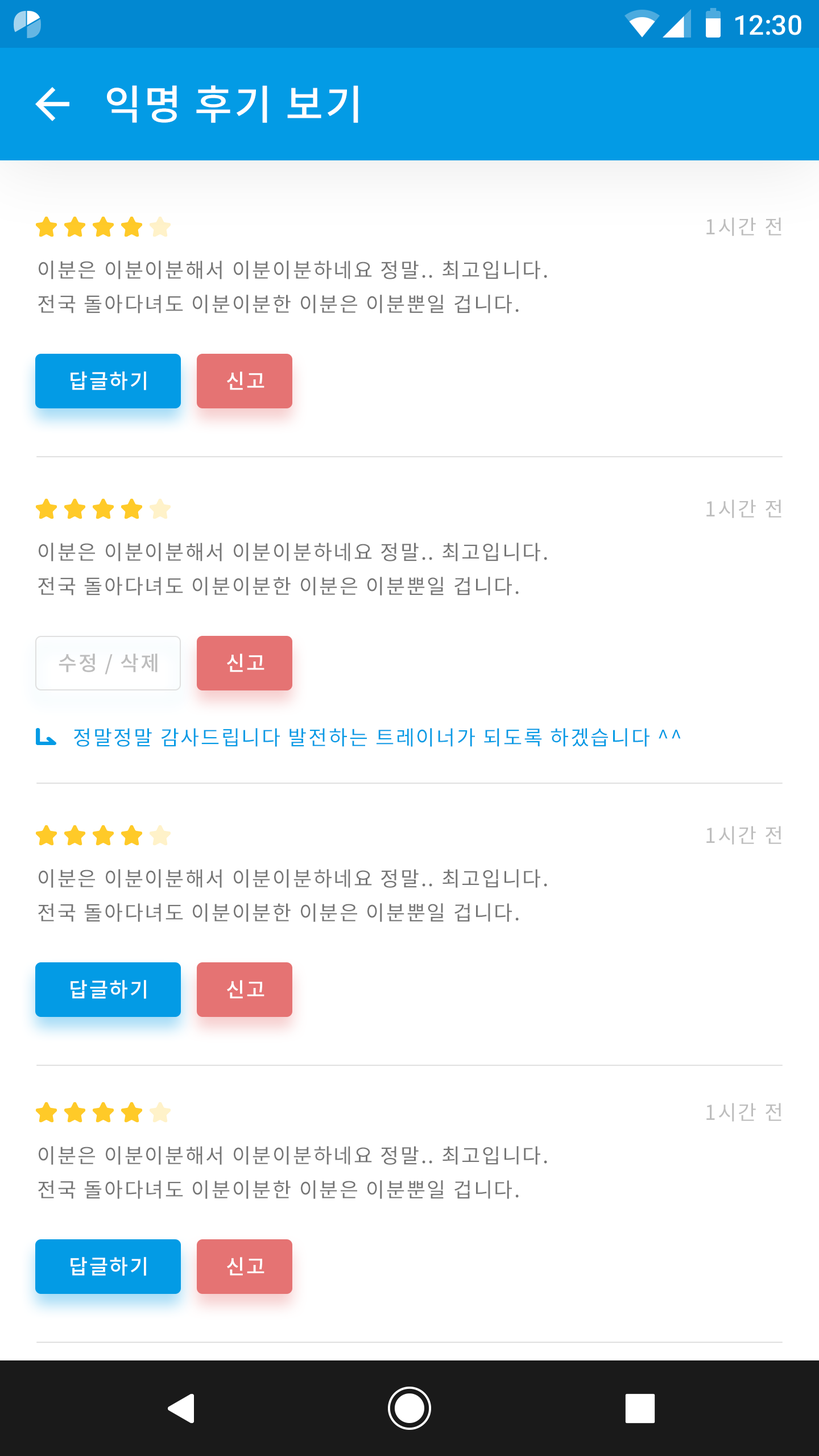
<style>
.page{position:relative;width:819px;height:1456px;background:#ffffff}
.page>*{position:absolute;margin:0}
.t1{font:27.3px "Roboto-Medium";color:#ffffff}
.t2{font:40.9px "NotoSansCJKkr-Medium";letter-spacing:0.05em;color:#ffffff}
.t3{font:20.5px "NotoSansCJKkr-Regular";letter-spacing:0.072em;color:#bdbdbd}
.t4{font:20.5px/34.1px "NotoSansCJKkr-Regular";letter-spacing:0.072em;color:#757575}
.t5{font:20.5px "NotoSansCJKkr-Medium";letter-spacing:0.072em;color:#ffffff}
.t6{font:20.5px "NotoSansCJKkr-Medium";letter-spacing:0.072em;color:#bdbdbd}
.t7{font:20.5px "NotoSansCJKkr-Regular";letter-spacing:0.072em;color:#039be5}
</style>
<div class="page">
<p class="t1" style="left:735px;top:15px;width:66px;height:20px">12:30</p>
<p class="t2" style="left:107px;top:85px;width:251px;height:38px">익명 후기 보기</p>
<p class="t3" style="left:706px;top:217px;width:75px;height:19px">1시간 전</p>
<p class="t4" style="left:38px;top:260px;width:509px;height:53px">이분은 이분이분해서 이분이분하네요 정말.. 최고입니다.<br>전국 돌아다녀도 이분이분한 이분은 이분뿐일 겁니다.</p>
<p class="t5" style="left:71px;top:371px;width:75px;height:19px">답글하기</p>
<p class="t5" style="left:227px;top:371px;width:37px;height:19px">신고</p>
<p class="t3" style="left:706px;top:499px;width:75px;height:19px">1시간 전</p>
<p class="t4" style="left:38px;top:543px;width:509px;height:52px">이분은 이분이분해서 이분이분하네요 정말.. 최고입니다.<br>전국 돌아다녀도 이분이분한 이분은 이분뿐일 겁니다.</p>
<p class="t6" style="left:59px;top:653px;width:99px;height:22px">수정 / 삭제</p>
<p class="t5" style="left:227px;top:653px;width:37px;height:19px">신고</p>
<p class="t7" style="left:74px;top:728px;width:607px;height:19px">정말정말 감사드립니다 발전하는 트레이너가 되도록 하겠습니다 ^^</p>
<p class="t3" style="left:706px;top:826px;width:75px;height:19px">1시간 전</p>
<p class="t4" style="left:38px;top:869px;width:509px;height:53px">이분은 이분이분해서 이분이분하네요 정말.. 최고입니다.<br>전국 돌아다녀도 이분이분한 이분은 이분뿐일 겁니다.</p>
<p class="t5" style="left:71px;top:980px;width:75px;height:19px">답글하기</p>
<p class="t5" style="left:227px;top:980px;width:37px;height:19px">신고</p>
<p class="t3" style="left:706px;top:1103px;width:75px;height:19px">1시간 전</p>
<p class="t4" style="left:38px;top:1146px;width:509px;height:53px">이분은 이분이분해서 이분이분하네요 정말.. 최고입니다.<br>전국 돌아다녀도 이분이분한 이분은 이분뿐일 겁니다.</p>
<p class="t5" style="left:71px;top:1257px;width:75px;height:19px">답글하기</p>
<p class="t5" style="left:227px;top:1257px;width:37px;height:19px">신고</p>
</div>
